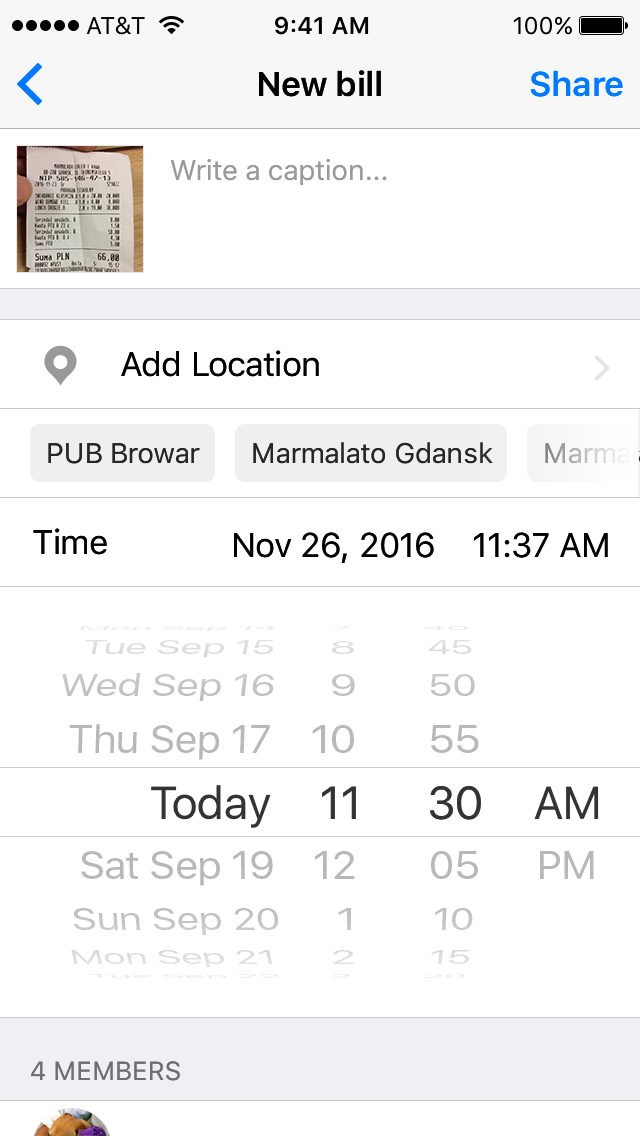
<style>
.page{position:relative;width:640px;height:1136px;background:#ffffff}
.page>*{position:absolute;margin:0}
.t1{font:34px "SFUIText-Semibold";letter-spacing:-0.025em;color:#000000}
.t2{font:34px "SFUIText-Semibold";letter-spacing:-0.025em;color:#007aff}
.t3{font:28px "SFUIText-Regular";letter-spacing:-0.01em;color:#999999}
.t4{font:34px "SFUIText-Regular";letter-spacing:-0.025em;color:#000000}
.t5{font:28px "SFUIText-Regular";letter-spacing:-0.01em;color:#262626}
.t6{font:7.6px "SFUIText-Regular";letter-spacing:-0.03em;color:#eaeaea;scale:4.99 1}
.t7{font:5.6px "SFUIText-Regular";letter-spacing:-0.03em;color:#ececec;text-transform:uppercase;scale:6.31 1}
.t8{font:5.8px "SFUIText-Regular";letter-spacing:-0.03em;color:#eaeaea;text-transform:uppercase;scale:6.62 1}
.t9{font:19.9px "SFUIText-Regular";letter-spacing:-0.03em;color:#dddddd;scale:1.98 1}
.t10{font:19px "SFUIText-Regular";letter-spacing:-0.03em;color:#dddddd;text-transform:uppercase;scale:2.33 1}
.t11{font:19.6px "SFUIText-Regular";letter-spacing:-0.03em;color:#dddddd;text-transform:uppercase;scale:1.96 1}
.t12{font:30.6px "SFUIText-Regular";letter-spacing:-0.03em;color:#c4c4c4;scale:1.33 1}
.t13{font:29.6px "SFUIText-Regular";letter-spacing:-0.03em;color:#c4c4c4;text-transform:uppercase;scale:1.5 1}
.t14{font:30.5px "SFUIText-Regular";letter-spacing:-0.03em;color:#c5c5c5;text-transform:uppercase;scale:1.33 1}
.t15{font:39px "SFUIText-Regular";letter-spacing:-0.03em;color:#b8b8b8;scale:1.05 1}
.t16{font:37.9px "SFUIText-Regular";letter-spacing:-0.03em;color:#b8b8b8;text-transform:uppercase;scale:1.17 1}
.t17{font:39.1px "SFUIText-Regular";letter-spacing:-0.03em;color:#b8b8b8;text-transform:uppercase;scale:1.13 1}
.t18{font:46px "SFUIDisplay-Regular";color:#333333}
.t19{font:46px "SFUIDisplay-Regular";color:#333333;text-transform:uppercase}
.t20{font:38.8px "SFUIText-Regular";letter-spacing:-0.03em;color:#b8b8b8;scale:1.07 1}
.t21{font:38.8px "SFUIText-Regular";letter-spacing:-0.03em;color:#b8b8b8;text-transform:uppercase;scale:1.12 1}
.t22{font:38.8px "SFUIText-Regular";letter-spacing:-0.03em;color:#b8b8b8;text-transform:uppercase;scale:1.11 1}
.t23{font:38.8px "SFUIText-Regular";letter-spacing:-0.03em;color:#b8b8b8;text-transform:uppercase;scale:1.07 1}
.t24{font:30.5px "SFUIText-Regular";letter-spacing:-0.03em;color:#c5c5c5;scale:1.33 1}
.t25{font:29.6px "SFUIText-Regular";letter-spacing:-0.03em;color:#c3c3c3;text-transform:uppercase;scale:1.5 1}
.t26{font:30.5px "SFUIText-Regular";letter-spacing:-0.03em;color:#c3c3c3;text-transform:uppercase;scale:1.33 1}
.t27{font:20.6px "SFUIText-Regular";letter-spacing:-0.03em;color:#dddddd;scale:1.91 1}
.t28{font:19.6px "SFUIText-Regular";letter-spacing:-0.03em;color:#dedede;text-transform:uppercase;scale:2.27 1}
.t29{font:20.3px "SFUIText-Regular";letter-spacing:-0.03em;color:#dddddd;text-transform:uppercase;scale:2 1}
.t30{font:7.1px "SFUIText-Regular";letter-spacing:-0.03em;color:#eaeaea;scale:5.38 1}
.t31{font:5.4px "SFUIText-Regular";letter-spacing:-0.03em;color:#eaeaea;text-transform:uppercase;scale:7.01 1}
.t32{font:5.9px "SFUIText-Regular";letter-spacing:-0.03em;color:#eaeaea;text-transform:uppercase;scale:6.19 1}
.t33{font:26px "SFUIText-Regular";letter-spacing:-0.005em;color:#6e6e70;text-transform:uppercase}
</style>
<div class="page">
<p class="t1" style="left:259px;top:70px;width:122px;height:27px">New bill</p>
<p class="t2" style="left:530px;top:70px;width:93px;height:27px">Share</p>
<p class="t3" style="left:170px;top:159px;width:217px;height:26px">Write a caption...</p>
<p class="t4" style="left:121px;top:350px;width:198px;height:27px">Add Location</p>
<p class="t5" style="left:48px;top:443px;width:152px;height:21px">PUB Browar</p>
<p class="t5" style="left:253px;top:442px;width:240px;height:22px">Marmalato Gdansk</p>
<p class="t4" style="left:33px;top:528px;width:74px;height:27px">Time</p>
<p class="t4" style="left:234px;top:532px;width:374px;height:31px">Nov 26, 2016    11:37 AM</p>
<p class="t6" style="left:79px;top:626px;width:197px;height:5px">Mon Sep 14</p>
<p class="t7" style="left:334px;top:626px;width:16px;height:4px">7</p>
<p class="t8" style="left:424px;top:626px;width:44px;height:4px">40</p>
<p class="t9" style="left:85px;top:640px;width:188px;height:18px">Tue Sep 15</p>
<p class="t10" style="left:332px;top:641px;width:22px;height:13px">8</p>
<p class="t11" style="left:429px;top:640px;width:43px;height:14px">45</p>
<p class="t12" style="left:62px;top:673px;width:212px;height:28px">Wed Sep 16</p>
<p class="t13" style="left:332px;top:674px;width:23px;height:22px">9</p>
<p class="t14" style="left:431px;top:674px;width:44px;height:22px">50</p>
<p class="t15" style="left:69px;top:724px;width:201px;height:36px">Thu Sep 17</p>
<p class="t16" style="left:312px;top:725px;width:42px;height:28px">10</p>
<p class="t17" style="left:431px;top:725px;width:48px;height:28px">55</p>
<p class="t18" style="left:151px;top:785px;width:120px;height:43px">Today</p>
<p class="t19" style="left:322px;top:786px;width:34px;height:33px">11</p>
<p class="t19" style="left:430px;top:786px;width:51px;height:34px">30</p>
<p class="t19" style="left:534px;top:786px;width:65px;height:33px">AM</p>
<p class="t20" style="left:81px;top:851px;width:192px;height:35px">Sat Sep 19</p>
<p class="t21" style="left:315px;top:851px;width:40px;height:28px">12</p>
<p class="t22" style="left:431px;top:851px;width:47px;height:28px">05</p>
<p class="t23" style="left:540px;top:851px;width:54px;height:28px">PM</p>
<p class="t24" style="left:73px;top:908px;width:205px;height:27px">Sun Sep 20</p>
<p class="t25" style="left:338px;top:908px;width:13px;height:22px">1</p>
<p class="t26" style="left:435px;top:908px;width:38px;height:22px">10</p>
<p class="t27" style="left:71px;top:950px;width:202px;height:18px">Mon Sep 21</p>
<p class="t28" style="left:333px;top:950px;width:21px;height:14px">2</p>
<p class="t29" style="left:431px;top:950px;width:38px;height:14px">15</p>
<p class="t30" style="left:87px;top:974px;width:194px;height:5px">Tue Sep 22</p>
<p class="t31" style="left:331px;top:974px;width:20px;height:4px">3</p>
<p class="t32" style="left:424px;top:974px;width:41px;height:5px">20</p>
<p class="t33" style="left:31px;top:1061px;width:149px;height:20px">4 members</p>
</div>
